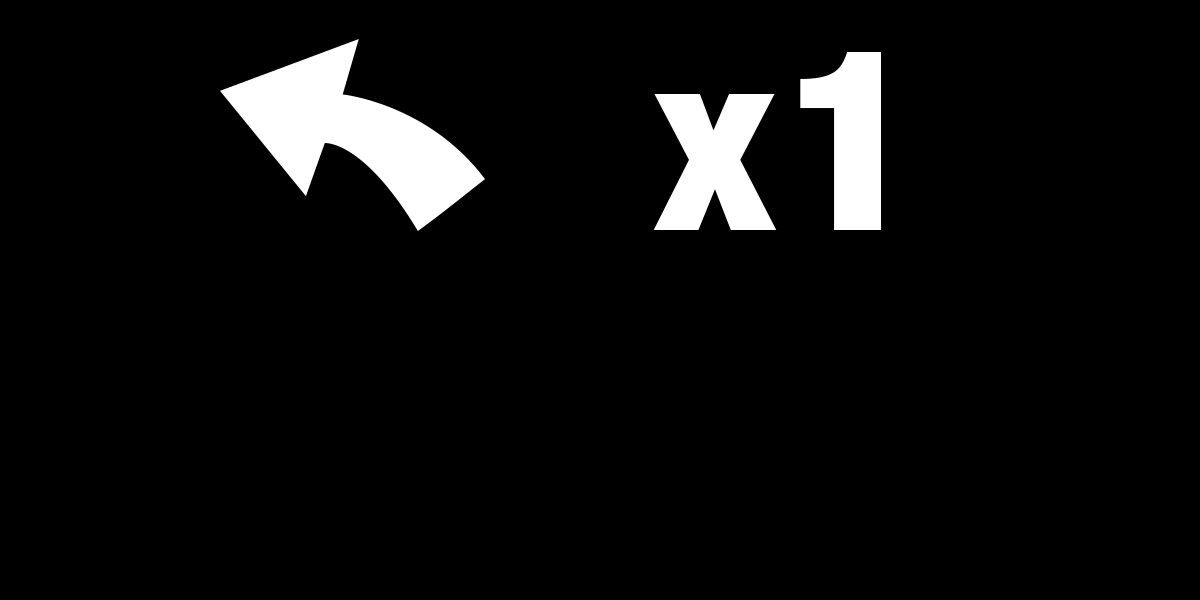
<style>
.page{position:relative;width:1200px;height:600px;background:#000000}
.page>*{position:absolute;margin:0}
.t1{font:252.3px "HelveticaNeue-CondensedBlack";letter-spacing:0.05em;color:#ffffff}
</style>
<div class="page">
<p class="t1" style="left:653px;top:52px;width:228px;height:178px">x1</p>
</div>
